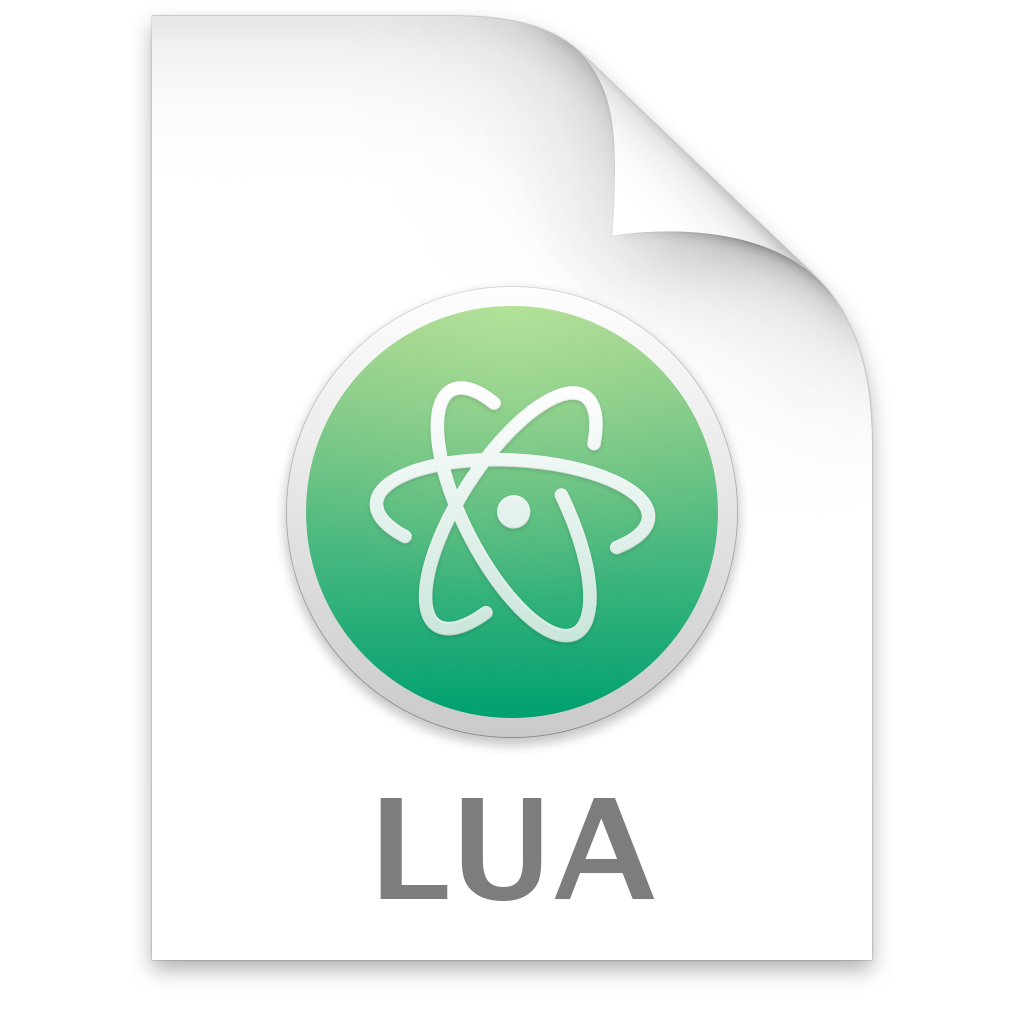
<style>
.page{position:relative;width:1024px;height:1024px;background:#ffffff}
.page>*{position:absolute;margin:0}
.t1{font:140px "LucidaGrande-Bold";color:#7d7d7d}
</style>
<div class="page">
<p class="t1" style="left:380px;top:798px;width:275px;height:103px">LUA</p>
</div>
